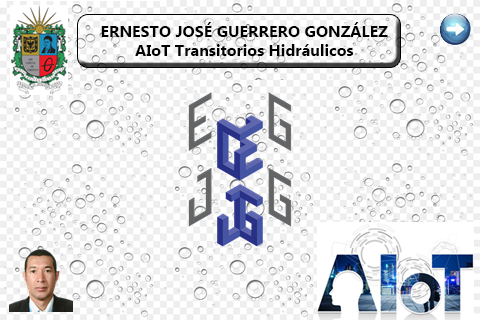
<style>
.page{position:relative;width:480px;height:320px;background:#ffffff}
.page>*{position:absolute;margin:0}
.t1{font:16px "MyanmarText-Bold";color:#000000}
</style>
<div class="page">
<p class="t1" style="left:101px;top:22px;width:287px;height:34px;text-align:center">ERNESTO JOSÉ GUERRERO GONZÁLEZ<br>AIoT Transitorios Hidráulicos</p>
</div>
